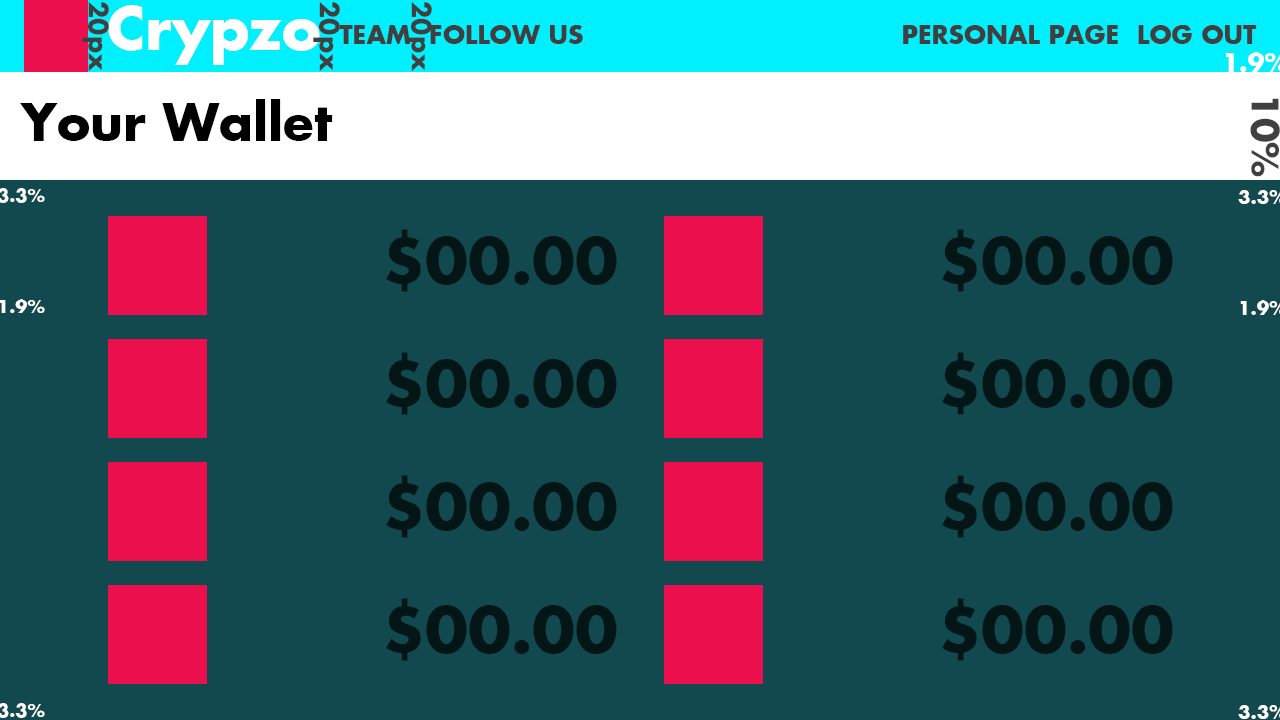
<style>
.page{position:relative;width:1280px;height:720px;background:#11494e}
.page>*{position:absolute;margin:0}
.t1{font:25.4px "FuturaKoyu";color:#404040}
.t2{font:58.3px "FuturaKoyu";color:#ffffff}
.t3{font:25px "FuturaKoyu";color:#404040}
.t4{font:50px "FuturaKoyu";color:#010000}
.t5{font:8.6px "FuturaKoyu";color:#404040}
.t6{font:62.2px "FuturaKoyu";color:#041516}
.t7{font:17.5px "FuturaKoyu";color:#ffffff}
</style>
<div class="page">
<p class="t1" style="left:82px;top:2px;width:27px;height:70px;rotate:90deg">20px</p>
<p class="t2" style="left:108px;top:5px;width:212px;height:60px">Crypzo</p>
<p class="t1" style="left:313px;top:2px;width:27px;height:70px;rotate:90deg">20px</p>
<p class="t1" style="left:405px;top:2px;width:27px;height:70px;rotate:90deg">20px</p>
<p class="t3" style="left:339px;top:25px;width:72px;height:19px">TEAM</p>
<p class="t1" style="left:430px;top:25px;width:153px;height:19px">FOLLOW US</p>
<p class="t1" style="left:903px;top:25px;width:215px;height:19px">PERSONAL PAGE</p>
<p class="t1" style="left:1138px;top:25px;width:119px;height:19px">LOG OUT</p>
<p class="t4" style="left:20px;top:99px;width:313px;height:42px">Your Wallet</p>
<p class="t5" style="left:1250px;top:98px;width:30px;height:79px;rotate:90deg">10%</p>
<p class="t6" style="left:386px;top:229px;width:231px;height:63px">$00.00</p>
<p class="t6" style="left:942px;top:229px;width:231px;height:63px">$00.00</p>
<p class="t7" style="left:0px;top:299px;width:45px;height:14px">1.9%</p>
<p class="t6" style="left:386px;top:352px;width:231px;height:63px">$00.00</p>
<p class="t6" style="left:942px;top:352px;width:231px;height:63px">$00.00</p>
<p class="t6" style="left:386px;top:475px;width:231px;height:63px">$00.00</p>
<p class="t6" style="left:942px;top:475px;width:231px;height:63px">$00.00</p>
<p class="t6" style="left:386px;top:598px;width:231px;height:63px">$00.00</p>
<p class="t6" style="left:942px;top:598px;width:231px;height:63px">$00.00</p>
</div>
